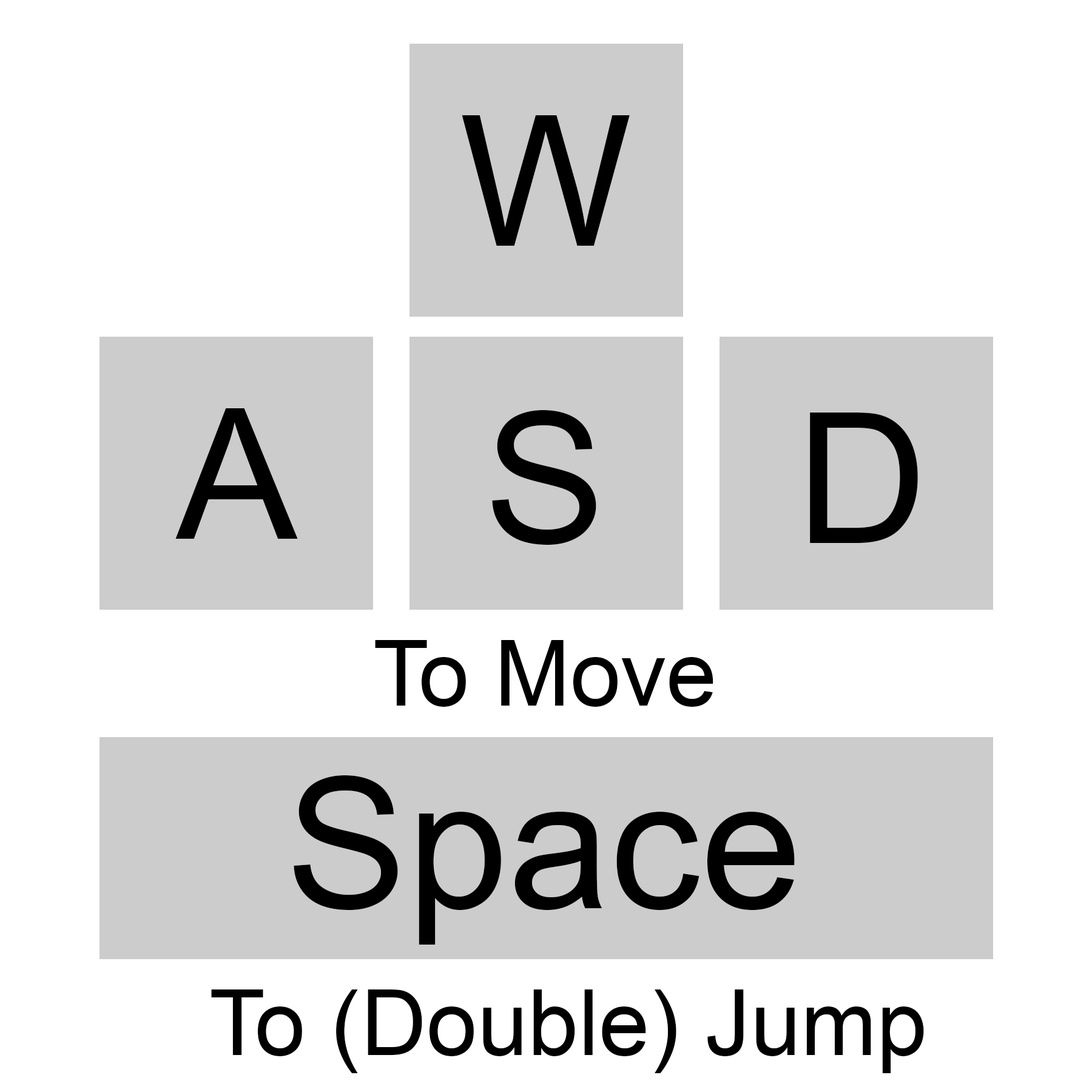
<style>
.page{position:relative;width:1092px;height:1092px;background:#ffffff}
.page>*{position:absolute;margin:0}
.t1{font:182px "ArialMT";color:#000000}
.t2{font:91px "ArialMT";color:#000000}
</style>
<div class="page">
<p class="t1" style="left:462px;top:115px;width:168px;height:131px">W</p>
<p class="t1" style="left:175px;top:408px;width:123px;height:131px">A</p>
<p class="t1" style="left:492px;top:410px;width:104px;height:135px">S</p>
<p class="t1" style="left:810px;top:413px;width:108px;height:130px">D</p>
<p class="t2" style="left:375px;top:640px;width:338px;height:67px">To Move</p>
<p class="t1" style="left:294px;top:775px;width:501px;height:170px">Space</p>
<p class="t2" style="left:211px;top:989px;width:713px;height:84px">To (Double) Jump</p>
</div>
